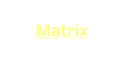
<style>
.page{position:relative;width:123px;height:60px;background:#ffffff}
.page>*{position:absolute;margin:0}
.t1{font:16px "AeroRegularSWFTE";color:#fffe7e;text-decoration:underline}
</style>
<div class="page">
<p class="t1" style="left:36px;top:24px;width:52px;height:15px">Matrix</p>
</div>
